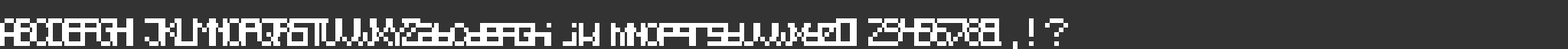
<style>
.page{position:relative;width:1568px;height:49px;background:#333333}
.page>*{position:absolute;margin:0}
.t1{font:23px "Pixeled";color:#ffffff}
</style>
<div class="page">
<p class="t1" style="left:0px;top:18px;width:18px;height:28px">A</p>
<p class="t1" style="left:16px;top:18px;width:18px;height:28px">B</p>
<p class="t1" style="left:32px;top:18px;width:19px;height:28px">C</p>
<p class="t1" style="left:48px;top:18px;width:19px;height:28px">D</p>
<p class="t1" style="left:64px;top:18px;width:19px;height:28px">E</p>
<p class="t1" style="left:80px;top:18px;width:19px;height:28px">F</p>
<p class="t1" style="left:96px;top:18px;width:19px;height:28px">G</p>
<p class="t1" style="left:113px;top:18px;width:18px;height:28px">H</p>
<p class="t1" style="left:145px;top:18px;width:18px;height:28px">J</p>
<p class="t1" style="left:161px;top:18px;width:18px;height:28px">K</p>
<p class="t1" style="left:177px;top:18px;width:18px;height:28px">L</p>
<p class="t1" style="left:193px;top:18px;width:23px;height:28px">M</p>
<p class="t1" style="left:209px;top:18px;width:18px;height:28px">N</p>
<p class="t1" style="left:225px;top:18px;width:18px;height:28px">O</p>
<p class="t1" style="left:241px;top:18px;width:19px;height:28px">P</p>
<p class="t1" style="left:257px;top:18px;width:23px;height:28px">Q</p>
<p class="t1" style="left:273px;top:18px;width:19px;height:28px">R</p>
<p class="t1" style="left:289px;top:18px;width:19px;height:28px">S</p>
<p class="t1" style="left:305px;top:18px;width:23px;height:28px">T</p>
<p class="t1" style="left:322px;top:18px;width:18px;height:28px">U</p>
<p class="t1" style="left:338px;top:18px;width:23px;height:28px">V</p>
<p class="t1" style="left:354px;top:18px;width:23px;height:28px">W</p>
<p class="t1" style="left:370px;top:18px;width:23px;height:28px">X</p>
<p class="t1" style="left:386px;top:18px;width:23px;height:28px">Y</p>
<p class="t1" style="left:402px;top:18px;width:18px;height:28px">Z</p>
<p class="t1" style="left:418px;top:23px;width:18px;height:23px">a</p>
<p class="t1" style="left:434px;top:23px;width:18px;height:23px">b</p>
<p class="t1" style="left:450px;top:23px;width:19px;height:23px">c</p>
<p class="t1" style="left:466px;top:23px;width:19px;height:23px">d</p>
<p class="t1" style="left:482px;top:23px;width:19px;height:23px">e</p>
<p class="t1" style="left:498px;top:23px;width:19px;height:23px">f</p>
<p class="t1" style="left:514px;top:23px;width:19px;height:23px">g</p>
<p class="t1" style="left:531px;top:23px;width:18px;height:23px">h</p>
<p class="t1" style="left:547px;top:23px;width:4px;height:23px">i</p>
<p class="t1" style="left:563px;top:23px;width:14px;height:23px">j</p>
<p class="t1" style="left:579px;top:23px;width:18px;height:23px">k</p>
<p class="t1" style="left:611px;top:23px;width:23px;height:23px">m</p>
<p class="t1" style="left:627px;top:23px;width:18px;height:23px">n</p>
<p class="t1" style="left:643px;top:23px;width:19px;height:23px">o</p>
<p class="t1" style="left:659px;top:23px;width:19px;height:23px">p</p>
<p class="t1" style="left:675px;top:23px;width:19px;height:23px">q</p>
<p class="t1" style="left:691px;top:23px;width:19px;height:23px">r</p>
<p class="t1" style="left:707px;top:23px;width:19px;height:23px">s</p>
<p class="t1" style="left:724px;top:23px;width:18px;height:23px">t</p>
<p class="t1" style="left:740px;top:23px;width:18px;height:23px">u</p>
<p class="t1" style="left:756px;top:23px;width:23px;height:23px">v</p>
<p class="t1" style="left:772px;top:23px;width:23px;height:23px">w</p>
<p class="t1" style="left:788px;top:23px;width:23px;height:23px">x</p>
<p class="t1" style="left:804px;top:23px;width:18px;height:23px">y</p>
<p class="t1" style="left:820px;top:23px;width:18px;height:23px">z</p>
<p class="t1" style="left:836px;top:18px;width:18px;height:28px">0</p>
<p class="t1" style="left:868px;top:18px;width:19px;height:28px">2</p>
<p class="t1" style="left:884px;top:18px;width:19px;height:28px">3</p>
<p class="t1" style="left:900px;top:18px;width:19px;height:28px">4</p>
<p class="t1" style="left:916px;top:18px;width:19px;height:28px">5</p>
<p class="t1" style="left:933px;top:18px;width:18px;height:28px">6</p>
<p class="t1" style="left:949px;top:18px;width:18px;height:28px">7</p>
<p class="t1" style="left:965px;top:18px;width:18px;height:28px">8</p>
<p class="t1" style="left:981px;top:18px;width:18px;height:28px">9</p>
<p class="t1" style="left:1029px;top:18px;width:5px;height:28px">!</p>
<p class="t1" style="left:1045px;top:18px;width:23px;height:28px">?</p>
</div>
